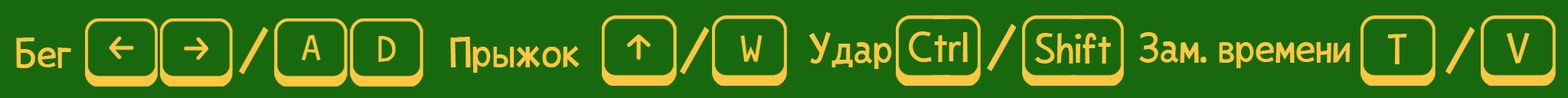
<style>
.page{position:relative;width:1568px;height:98px;background:#18690e}
.page>*{position:absolute;margin:0}
.t1{font:55.1px "CrazyV1";color:#fbc741}
.t2{font:36.8px "CrazyV1";color:#fbc741}
.t3{font:36.7px "CrazyV1";color:#fbc741}
</style>
<div class="page">
<p class="t1" style="left:239px;top:27px;width:30px;height:47px">/</p>
<p class="t1" style="left:680px;top:27px;width:30px;height:47px">/</p>
<p class="t1" style="left:987px;top:24px;width:30px;height:47px">/</p>
<p class="t1" style="left:1446px;top:27px;width:29px;height:47px">/</p>
<p class="t2" style="left:16px;top:38px;width:55px;height:30px">Бег</p>
<p class="t3" style="left:450px;top:37px;width:130px;height:36px">Прыжок</p>
<p class="t3" style="left:808px;top:32px;width:84px;height:37px">Удар</p>
<p class="t3" style="left:1139px;top:32px;width:212px;height:36px">Зам. времени</p>
<p class="t3" style="left:1387px;top:34px;width:20px;height:30px">T</p>
<p class="t3" style="left:1506px;top:33px;width:24px;height:31px">V</p>
</div>
